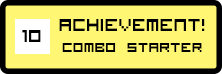
<style>
.page{position:relative;width:222px;height:74px;background:#fff774}
.page>*{position:absolute;margin:0}
.t1{font:23px "VisitorTT1BRK";color:#000000}
.t2{font:18px "VisitorTT1BRK";color:#000000}
</style>
<div class="page">
<p class="t1" style="left:22px;top:30px;width:19px;height:12px">10</p>
<p class="t2" style="left:59px;top:19px;width:146px;height:33px;text-align:center"><span class="t1">achievement!<br></span>Combo Starter</p>
</div>
